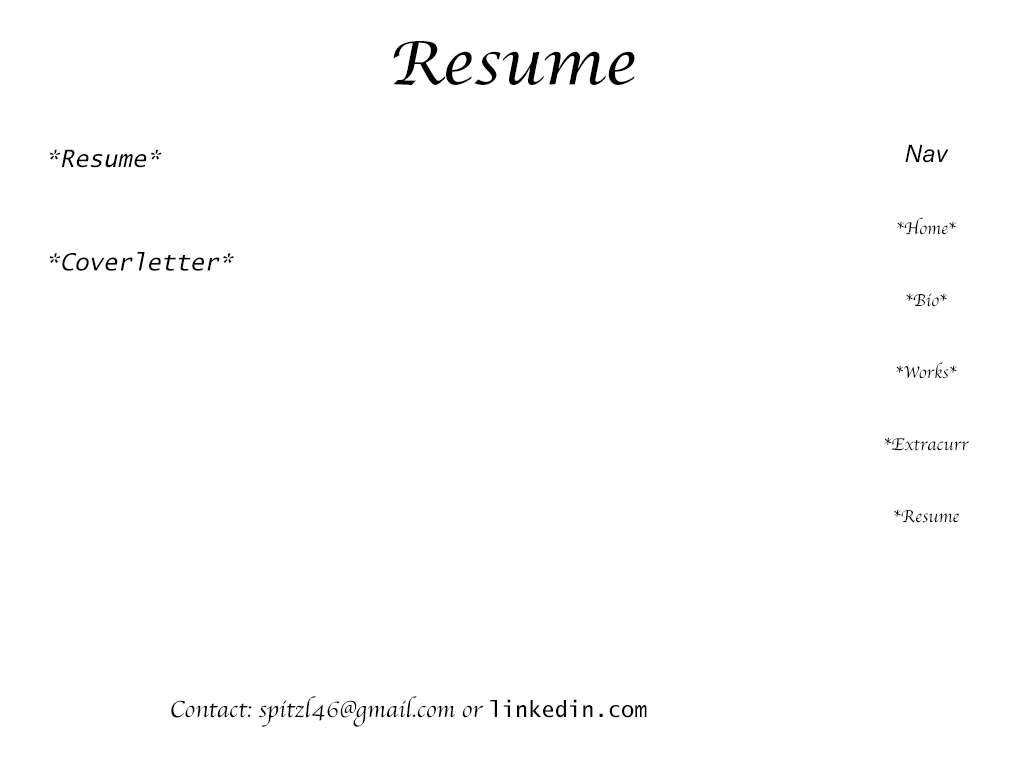
<style>
.page{position:relative;width:1024px;height:768px;background:#ffffff}
.page>*{position:absolute;margin:0}
.t1{font:60px "LucidaCalligraphy-Italic";color:#000000}
.t2{font:24px "LucidaSans-TypewriterOblique";color:#000000}
.t3{font:18px/24px "Apple-Chancery";color:#000000}
.t4{font:24px/24px "Arial-ItalicMT";color:#000000}
.t5{font:24px "Apple-Chancery";color:#000000}
.t6{font:22px "LucidaSans-Typewriter";color:#000000}
</style>
<div class="page">
<p class="t1" style="left:393px;top:41px;width:242px;height:44px">Resume</p>
<p class="t2" style="left:49px;top:149px;width:113px;height:19px">*Resume*</p>
<p class="t3" style="left:884px;top:144px;width:86px;height:379px;text-align:center"><span class="t4"><br>Nav<br></span><br><br>*Home*<br><br><br>*Bio*<br><br><br>*Works*<br><br><br>*Extracurr<br><br><br>*Resume</p>
<p class="t2" style="left:49px;top:252px;width:185px;height:19px">*Coverletter*</p>
<p class="t5" style="left:171px;top:696px;width:476px;height:31px">Contact: spitzl46@gmail.com or <span class="t6">linkedin.com</span></p>
</div>
